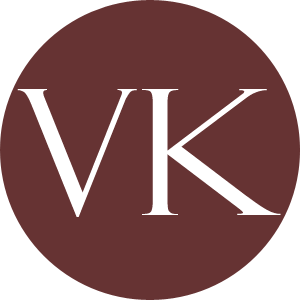
<style>
.page{position:relative;width:300px;height:300px;background:#663333}
.page>*{position:absolute;margin:0}
.t1{font:175px "FelixTitlingMT";color:#ffffff}
</style>
<div class="page">
<p class="t1" style="left:17px;top:89px;width:264px;height:128px">VK</p>
</div>
